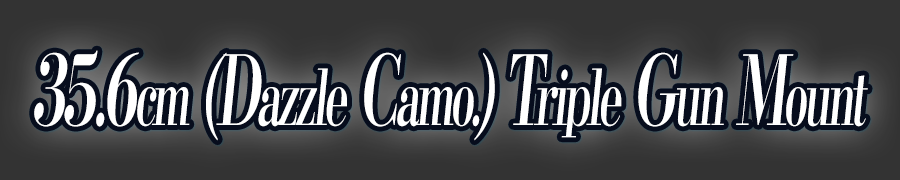
<style>
.page{position:relative;width:900px;height:180px;background:#333333}
.page>*{position:absolute;margin:0}
.t1{font:76.8px "KochoStd-Heavy";letter-spacing:-0.08em;color:#ffffff;font-style:italic;scale:0.57 1}
.t2{font:96px "KochoStd-Heavy";letter-spacing:-0.08em;color:#ffffff;font-style:italic;scale:0.57 1}
</style>
<div class="page">
<p class="t1" style="left:34px;top:50px;width:834px;height:91px"><span class="t2">35.6</span>cm<span class="t2"> (D</span>azzle<span class="t2"> C</span>amo.<span class="t2">) T</span>riple<span class="t2"> G</span>un<span class="t2"> M</span>ount</p>
</div>
